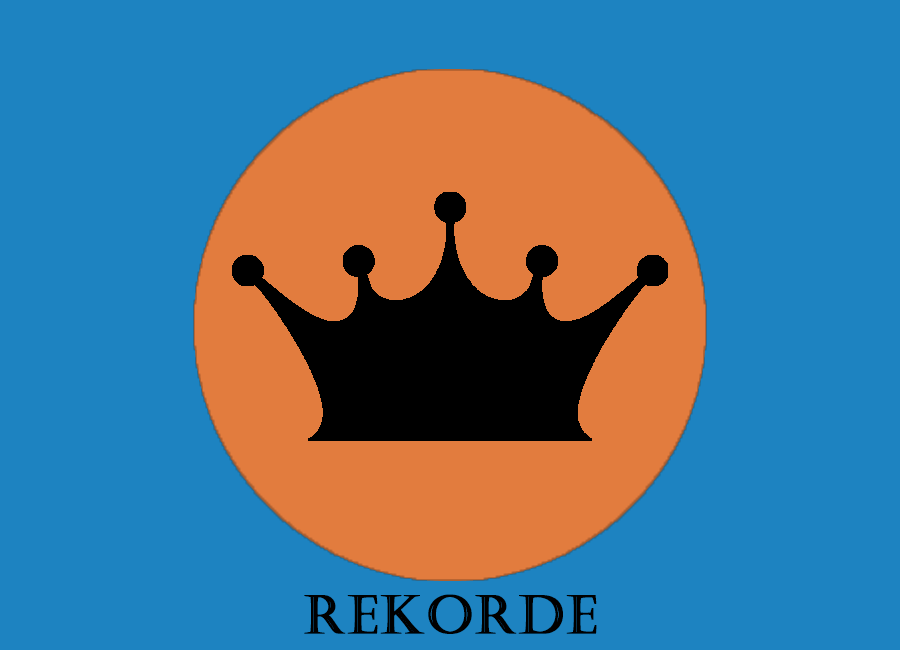
<style>
.page{position:relative;width:900px;height:650px;background:#1d83c1}
.page>*{position:absolute;margin:0}
.t1{font:53px "Castellar";letter-spacing:0.025em;color:#000000;font-weight:bold}
</style>
<div class="page">
<p class="t1" style="left:304px;top:594px;width:293px;height:40px">Rekorde</p>
</div>
